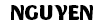
<style>
.page{position:relative;width:104px;height:25px;background:#ffffff}
.page>*{position:absolute;margin:0}
.t1{font:25px "iCielMijas-Ultra";color:#000000}
</style>
<div class="page">
<p class="t1" style="left:11px;top:5px;width:82px;height:15px">NGUYEN</p>
</div>
